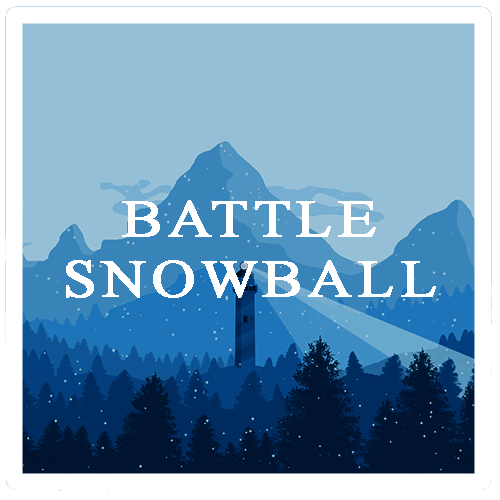
<style>
.page{position:relative;width:500px;height:500px;background:#94bfd7}
.page>*{position:absolute;margin:0}
.t1{font:53px "TimesNewRomanPSMT";letter-spacing:0.08em;color:#ffffff;font-weight:bold;scale:1.12 1}
</style>
<div class="page">
<p class="t1" style="left:66px;top:200px;width:370px;height:98px;text-align:center">BATTLE<br>SNOWBALL</p>
</div>
